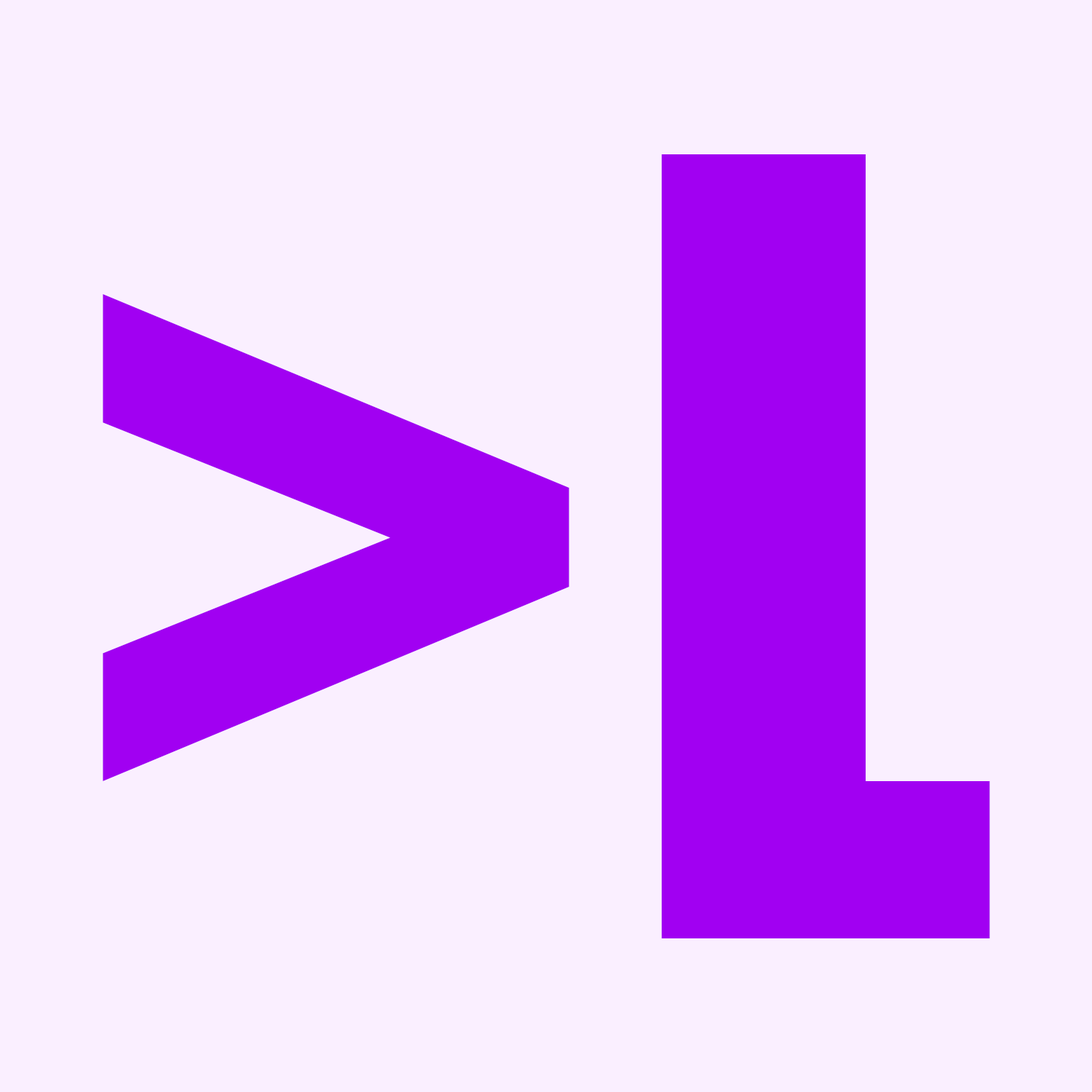
<style>
.page{position:relative;width:1092px;height:1092px;background:#faefff}
.page>*{position:absolute;margin:0}
.t1{font:992.4px "Impact";color:#a100f2}
</style>
<div class="page">
<p class="t1" style="left:103px;top:154px;width:887px;height:784px">L</p>
</div>
